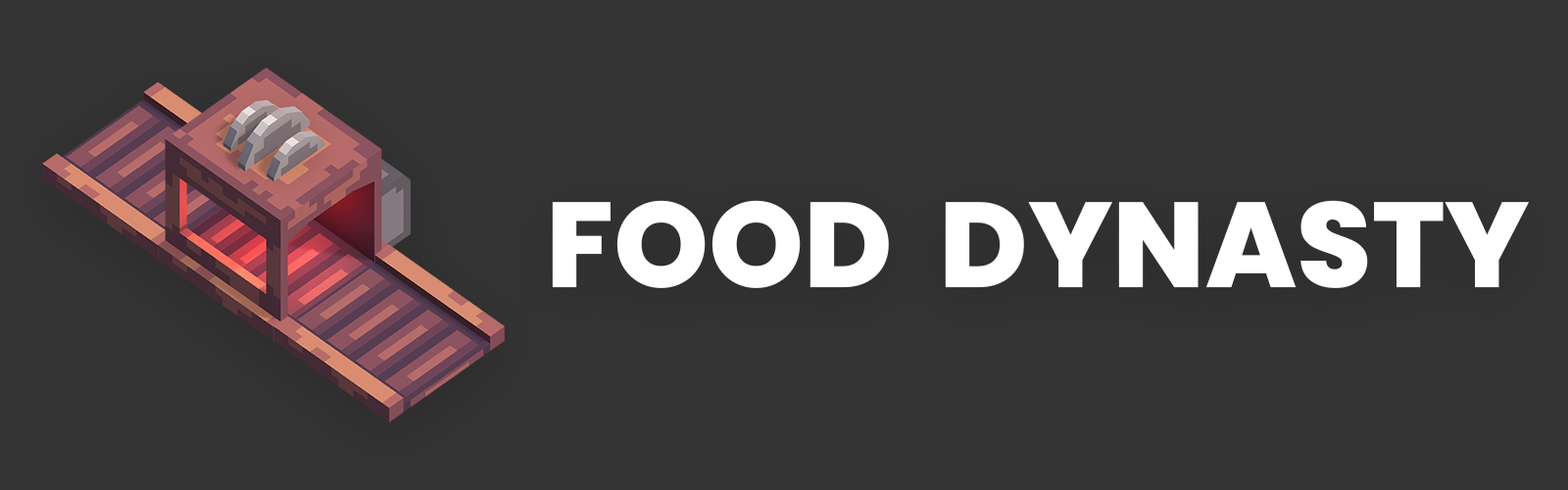
<style>
.page{position:relative;width:1568px;height:490px;background:#333333}
.page>*{position:absolute;margin:0}
.t1{font:120.6px "Poppins-ExtraBold";color:#ffffff}
</style>
<div class="page">
<p class="t1" style="left:552px;top:200px;width:977px;height:88px">FOOD  DYNASTY</p>
</div>
